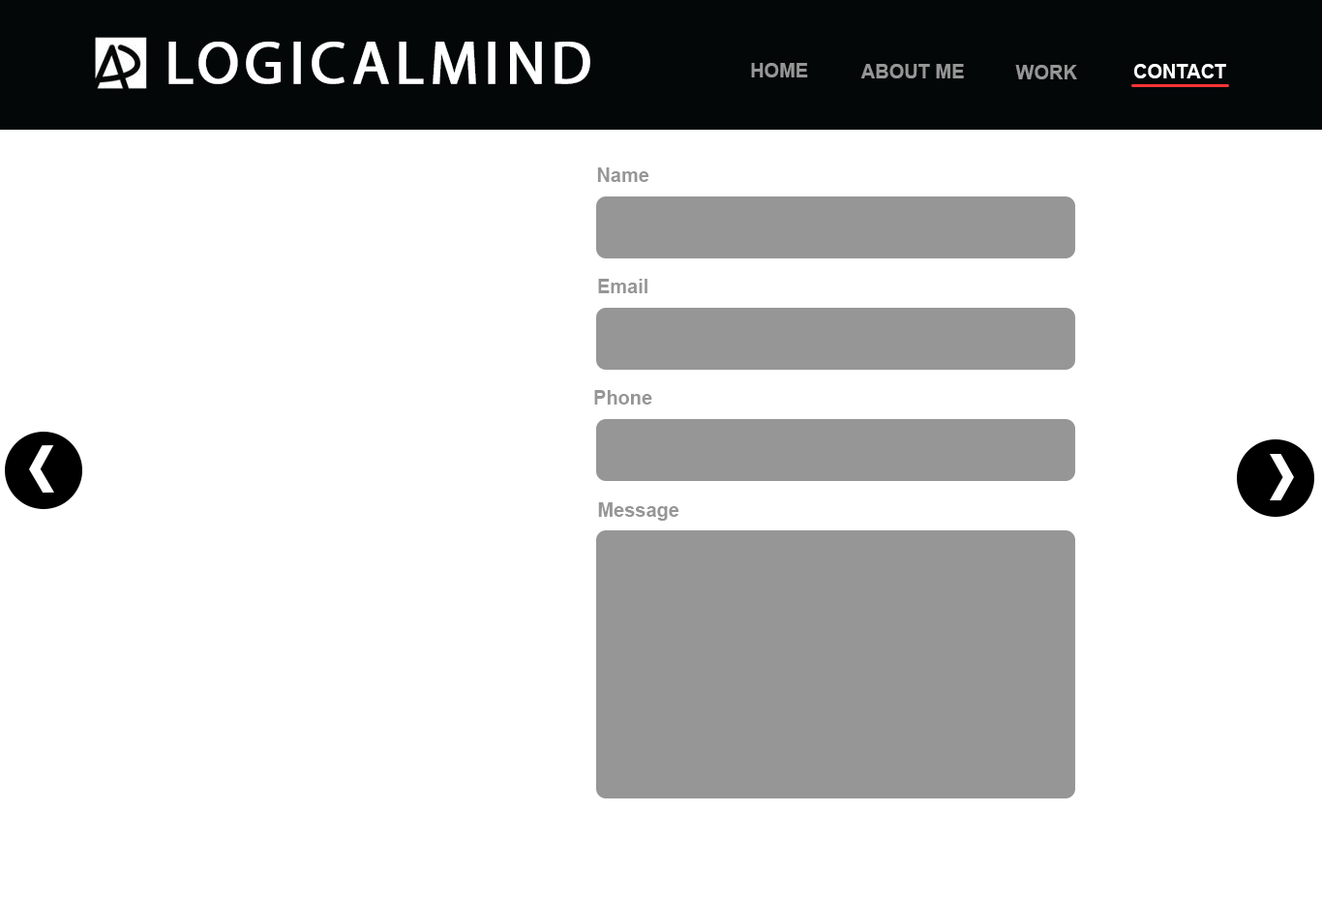
<style>
.page{position:relative;width:1322px;height:902px;background:#ffffff}
.page>*{position:absolute;margin:0}
.t1{font:60px "MyriadPro-Regular";letter-spacing:0.08em;color:#ffffff;font-weight:bold}
.t2{font:19.4px "Arial-BoldMT";color:#969696}
.t3{font:19.4px "Arial-BoldMT";color:#ffffff}
</style>
<div class="page">
<p class="t1" style="left:168px;top:42px;width:422px;height:42px">LOGICALMIND</p>
<p class="t2" style="left:751px;top:63px;width:57px;height:14px">HOME</p>
<p class="t2" style="left:860px;top:64px;width:104px;height:14px">ABOUT ME</p>
<p class="t2" style="left:1015px;top:65px;width:62px;height:14px">WORK</p>
<p class="t3" style="left:1134px;top:64px;width:92px;height:14px">CONTACT</p>
<p class="t2" style="left:597px;top:167px;width:52px;height:15px">Name</p>
<p class="t2" style="left:598px;top:279px;width:49px;height:14px;text-align:center">Email<br>t</p>
<p class="t2" style="left:594px;top:390px;width:58px;height:15px">Phone</p>
<p class="t2" style="left:598px;top:502px;width:81px;height:19px">Message</p>
</div>
